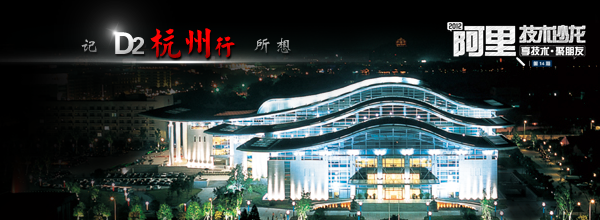
<style>
.page{position:relative;width:600px;height:220px}
.page>*{position:absolute;margin:0}
.t1{font:36px "DATK6";letter-spacing:-0.1em;color:#ff0000}
.t2{font:24px "DATK6";letter-spacing:-0.1em;color:#ff0000}
.t3{font:18px "FZWBJW--GB1-0";letter-spacing:0.2em}
.t4{font:30px "FZH4FW--GB1-0";letter-spacing:-0.1em}
.t5{font:24px "FZH4FW--GB1-0";letter-spacing:-0.1em}
</style>
<div class="page">
<p class="t1" style="left:150px;top:28px;width:85px;height:31px">杭州<span class="t2">行</span></p>
<p class="t3" style="left:81px;top:37px;width:210px;height:16px">记　　　　　　　所想</p>
<p class="t4" style="left:115px;top:32px;width:29px;height:22px"><span class="t5"> </span>D<span class="t5">2</span></p>
</div>
